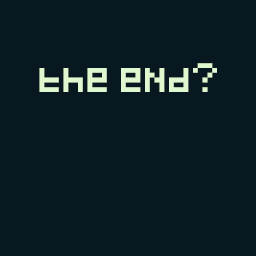
<style>
.page{position:relative;width:256px;height:256px;background:#071821}
.page>*{position:absolute;margin:0}
.t1{font:24px "Pixeled";color:#e0f8cf}
</style>
<div class="page">
<p class="t1" style="left:39px;top:63px;width:178px;height:29px">the end?</p>
</div>
